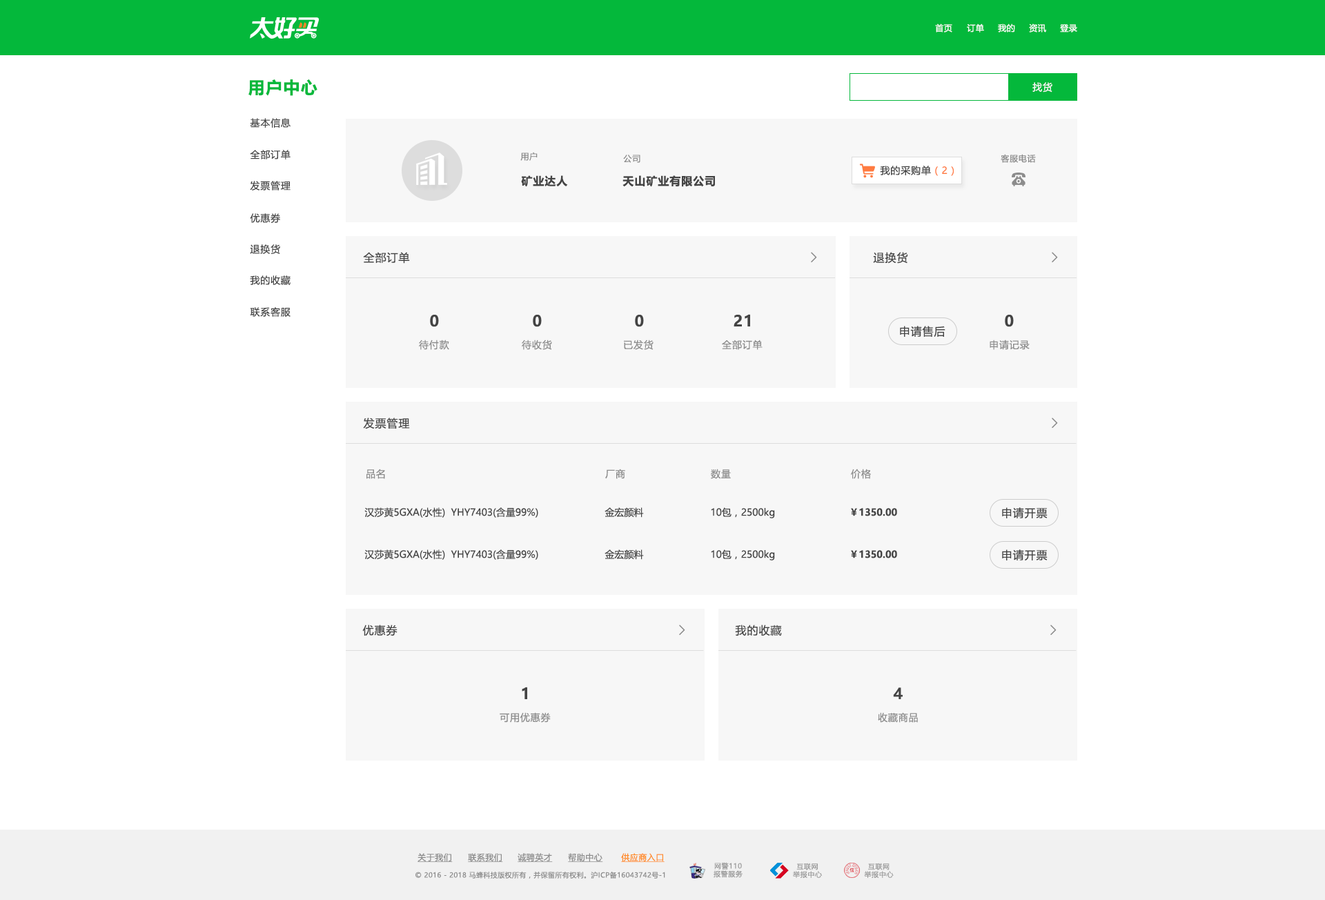
<style>
.page{position:relative;width:1325px;height:900px;background:#ffffff}
.page>*{position:absolute;margin:0}
.t1{font:8.3px "MicrosoftYaHeiUI";letter-spacing:0.04em;color:#ffffff}
.t2{font:16.6px "MicrosoftYaHeiUI-Bold";letter-spacing:0.06em;color:#04b83b}
.t3{font:9.7px "MicrosoftYaHei";letter-spacing:0.06em;color:#f7f7f7}
.t4{font:9.6px "MicrosoftYaHeiUI";letter-spacing:0.06em;color:#444444}
.t5{font:8.3px "MicrosoftYaHeiUI";letter-spacing:0.06em;color:#888888}
.t6{font:9.7px "MicrosoftYaHeiUI";letter-spacing:0.06em;color:#444444}
.t7{font:9.7px "MicrosoftYaHeiUI";letter-spacing:0.06em;color:#ff7b41}
.t8{font:11px "MicrosoftYaHeiUI-Bold";letter-spacing:0.06em;color:#444444}
.t9{font:11px "MicrosoftYaHeiUI";letter-spacing:0.06em;color:#444444}
.t10{font:13.8px "FangSong";color:#8c8c8c;font-weight:bold}
.t11{font:15.2px "MicrosoftYaHeiUI-Bold";letter-spacing:0.06em;color:#444444}
.t12{font:9.7px "MicrosoftYaHeiUI";letter-spacing:0.06em;color:#8c8c8c}
.t13{font:9.7px "MicrosoftYaHeiUI";color:#444444}
.t14{font:9.7px "MicrosoftYaHeiUI-Bold";color:#444444}
.t15{font:8.3px "MicrosoftYaHeiUI";letter-spacing:0.04em;color:#8c8c8c;text-decoration:underline}
.t16{font:8.3px "MicrosoftYaHeiUI";letter-spacing:0.04em;color:#ff8b25;text-decoration:underline}
.t17{font:6.9px/8px "MicrosoftYaHei";letter-spacing:0.06em;color:#999999}
.t18{font:6.9px "MicrosoftYaHeiUI";letter-spacing:0.04em;color:#8c8c8c}
</style>
<div class="page">
<p class="t1" style="left:935px;top:23px;width:17px;height:9px">首页</p>
<p class="t1" style="left:967px;top:23px;width:17px;height:9px">订单</p>
<p class="t1" style="left:998px;top:23px;width:17px;height:9px">我的</p>
<p class="t1" style="left:1029px;top:23px;width:17px;height:9px">资讯</p>
<p class="t1" style="left:1060px;top:24px;width:17px;height:8px">登录</p>
<p class="t2" style="left:248px;top:79px;width:69px;height:17px">用户中心</p>
<p class="t3" style="left:1032px;top:82px;width:20px;height:10px">找货</p>
<p class="t4" style="left:250px;top:118px;width:41px;height:10px">基本信息</p>
<p class="t4" style="left:250px;top:150px;width:41px;height:9px">全部订单</p>
<p class="t5" style="left:520px;top:152px;width:18px;height:9px">用户</p>
<p class="t5" style="left:623px;top:155px;width:17px;height:8px">公司</p>
<p class="t5" style="left:1001px;top:154px;width:35px;height:9px">客服电话</p>
<p class="t6" style="left:880px;top:166px;width:74px;height:10px">我的采购单<span class="t7">（2）</span></p>
<p class="t4" style="left:250px;top:181px;width:41px;height:9px">发票管理</p>
<p class="t8" style="left:521px;top:175px;width:47px;height:12px">矿业达人</p>
<p class="t8" style="left:622px;top:175px;width:93px;height:12px">天山矿业有限公司</p>
<p class="t4" style="left:250px;top:213px;width:30px;height:10px">优惠券</p>
<p class="t4" style="left:250px;top:244px;width:30px;height:10px">退换货</p>
<p class="t9" style="left:363px;top:252px;width:47px;height:12px">全部订单</p>
<p class="t10" style="left:811px;top:252px;width:6px;height:10px;rotate:180deg">&lt;</p>
<p class="t9" style="left:873px;top:252px;width:35px;height:12px">退换货</p>
<p class="t10" style="left:1052px;top:252px;width:6px;height:10px;rotate:180deg">&lt;</p>
<p class="t4" style="left:250px;top:275px;width:41px;height:10px">我的收藏</p>
<p class="t4" style="left:250px;top:307px;width:41px;height:10px">联系客服</p>
<p class="t11" style="left:430px;top:315px;width:9px;height:12px">0</p>
<p class="t11" style="left:533px;top:315px;width:9px;height:12px">0</p>
<p class="t11" style="left:635px;top:315px;width:9px;height:12px">0</p>
<p class="t11" style="left:734px;top:314px;width:16px;height:12px">21</p>
<p class="t11" style="left:1005px;top:315px;width:9px;height:12px">0</p>
<p class="t9" style="left:900px;top:326px;width:45px;height:11px">申请售后</p>
<p class="t12" style="left:419px;top:340px;width:30px;height:10px">待付款</p>
<p class="t12" style="left:522px;top:340px;width:30px;height:10px">待收货</p>
<p class="t12" style="left:624px;top:340px;width:30px;height:10px">已发货</p>
<p class="t12" style="left:722px;top:340px;width:41px;height:10px">全部订单</p>
<p class="t12" style="left:990px;top:340px;width:40px;height:10px">申请记录</p>
<p class="t9" style="left:363px;top:418px;width:47px;height:11px">发票管理</p>
<p class="t10" style="left:1052px;top:418px;width:6px;height:10px;rotate:180deg">&lt;</p>
<p class="t12" style="left:366px;top:469px;width:19px;height:10px">品名</p>
<p class="t12" style="left:605px;top:469px;width:20px;height:10px">厂商</p>
<p class="t12" style="left:711px;top:469px;width:20px;height:10px">数量</p>
<p class="t12" style="left:851px;top:469px;width:20px;height:10px">价格</p>
<p class="t13" style="left:364px;top:507px;width:174px;height:11px">汉莎黄5GXA(水性)  YHY7403(含量99%)</p>
<p class="t13" style="left:605px;top:507px;width:39px;height:11px">金宏颜料</p>
<p class="t13" style="left:711px;top:507px;width:64px;height:11px">10包，2500kg</p>
<p class="t14" style="left:851px;top:508px;width:46px;height:8px">￥1350.00</p>
<p class="t9" style="left:1002px;top:507px;width:46px;height:12px">申请开票</p>
<p class="t13" style="left:364px;top:549px;width:174px;height:11px">汉莎黄5GXA(水性)  YHY7403(含量99%)</p>
<p class="t13" style="left:605px;top:549px;width:39px;height:11px">金宏颜料</p>
<p class="t13" style="left:711px;top:549px;width:64px;height:11px">10包，2500kg</p>
<p class="t14" style="left:851px;top:550px;width:46px;height:8px">￥1350.00</p>
<p class="t9" style="left:1002px;top:549px;width:46px;height:12px">申请开票</p>
<p class="t9" style="left:362px;top:625px;width:36px;height:11px">优惠券</p>
<p class="t10" style="left:679px;top:625px;width:6px;height:10px;rotate:180deg">&lt;</p>
<p class="t9" style="left:735px;top:625px;width:47px;height:11px">我的收藏</p>
<p class="t10" style="left:1050px;top:625px;width:7px;height:10px;rotate:180deg">&lt;</p>
<p class="t11" style="left:522px;top:687px;width:5px;height:12px">1</p>
<p class="t11" style="left:893px;top:687px;width:10px;height:12px">4</p>
<p class="t12" style="left:500px;top:712px;width:51px;height:11px">可用优惠券</p>
<p class="t12" style="left:878px;top:712px;width:40px;height:11px">收藏商品</p>
<p class="t15" style="left:418px;top:853px;width:35px;height:9px">关于我们</p>
<p class="t15" style="left:468px;top:853px;width:35px;height:9px">联系我们</p>
<p class="t15" style="left:518px;top:853px;width:35px;height:9px">诚聘英才</p>
<p class="t15" style="left:568px;top:853px;width:35px;height:9px">帮助中心</p>
<p class="t16" style="left:621px;top:853px;width:44px;height:9px">供应商入口</p>
<p class="t17" style="left:714px;top:862px;width:29px;height:16px;text-align:center">网警110<br>报警服务</p>
<p class="t17" style="left:793px;top:863px;width:29px;height:15px;text-align:center">互联网<br>举报中心</p>
<p class="t17" style="left:864px;top:863px;width:30px;height:15px;text-align:center">互联网<br>举报中心</p>
<p class="t18" style="left:415px;top:871px;width:250px;height:8px">© 2016 - 2018 马蜂科技版权所有，并保留所有权利。沪ICP备16043742号-1</p>
</div>
